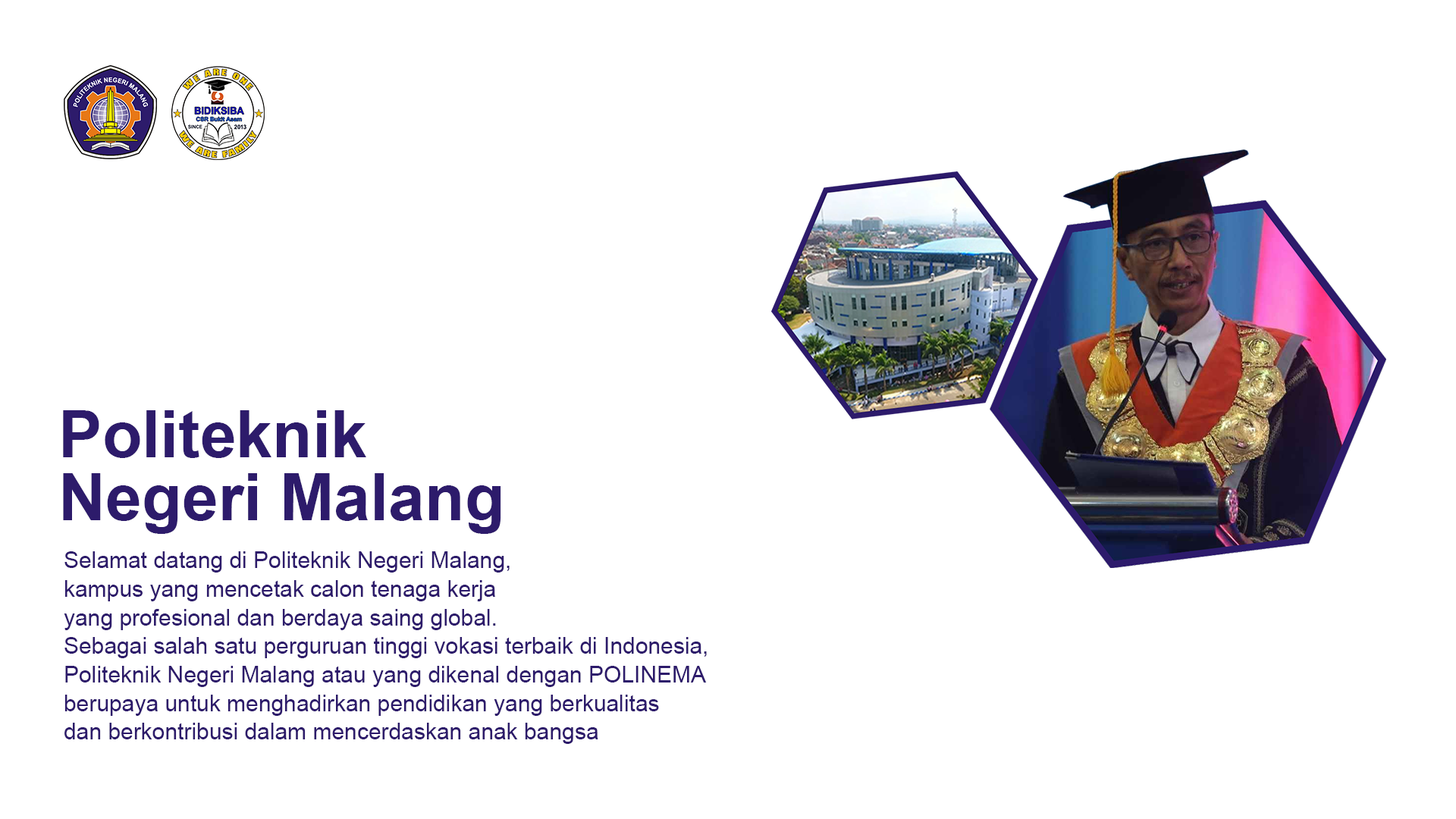
<style>
.page{position:relative;width:1456px;height:819px;background:#ffffff}
.page>*{position:absolute;margin:0}
.t1{font:65.2px/62.9px "Arial-BoldMT";color:#2d1b6b}
.t2{font:22.7px/28.6px "ArialMT";color:#2d1b6b}
</style>
<div class="page">
<p class="t1" style="left:63px;top:410px;width:438px;height:124px">Politeknik<br>Negeri Malang</p>
<p class="t2" style="left:64px;top:551px;width:643px;height:193px">Selamat datang di Politeknik Negeri Malang,<br>kampus yang mencetak calon tenaga kerja<br>yang profesional dan berdaya saing global.<br>Sebagai salah satu perguruan tinggi vokasi terbaik di Indonesia,<br>Politeknik Negeri Malang atau yang dikenal dengan POLINEMA<br>berupaya untuk menghadirkan pendidikan yang berkualitas<br>dan berkontribusi dalam mencerdaskan anak bangsa</p>
</div>
